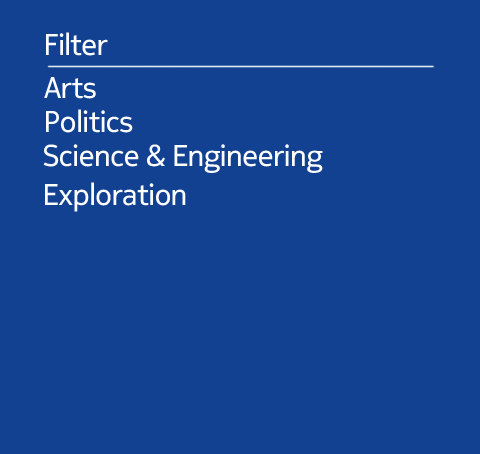
<style>
.page{position:relative;width:480px;height:454px;background:#124191}
.page>*{position:absolute;margin:0}
.t1{font:30px "NokiaPureHeadline-Regular";color:#ffffff}
.t2{font:30px "NokiaPureHeadline-Regular";letter-spacing:0.005em;color:#ffffff}
.t3{font:48px "NokiaPureHeadline-Regular";letter-spacing:0.005em;color:#124191}
</style>
<div class="page">
<p class="t1" style="left:46px;top:32px;width:62px;height:24px">Filter</p>
<p class="t1" style="left:44px;top:77px;width:52px;height:22px">Arts</p>
<p class="t2" style="left:46px;top:109px;width:87px;height:24px">Politics</p>
<p class="t2" style="left:43px;top:141px;width:301px;height:32px">Science &amp; Engineering<span class="t3">s</span></p>
<p class="t2" style="left:45px;top:182px;width:141px;height:30px">Exploration</p>
</div>
